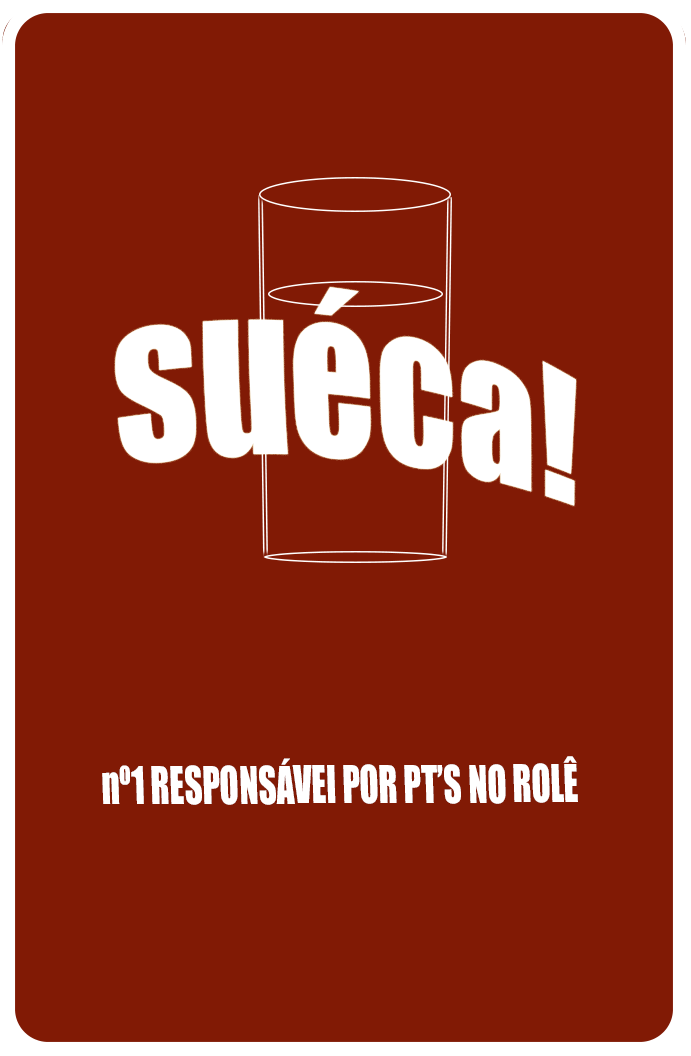
<style>
.page{position:relative;width:691px;height:1056px;background:#811a05}
.page>*{position:absolute;margin:0}
.t1{font:140px "Impact";color:#ffffff;scale:0.8 1}
.t2{font:48px "Impact";color:#ffffff;scale:0.73 1}
</style>
<div class="page">
<p class="t1" style="left:115px;top:287px;width:462px;height:219px">suéca!</p>
<p class="t2" style="left:102px;top:756px;width:476px;height:49px">nº1 RESPONSÁVEl POR PT’S NO ROLÊ</p>
</div>
